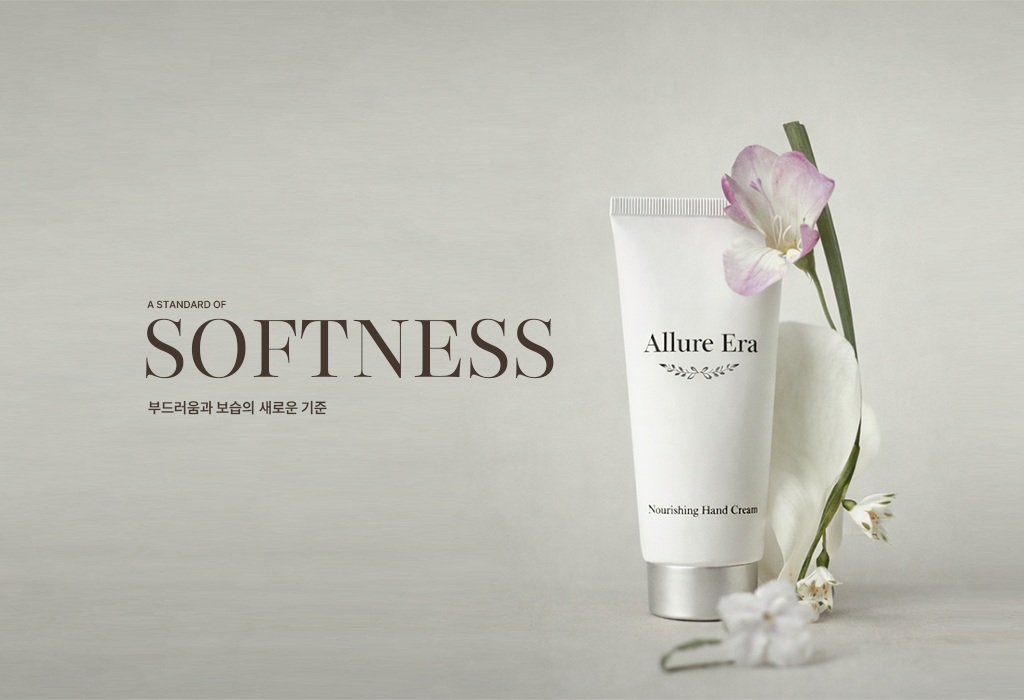
<style>
.page{position:relative;width:1024px;height:700px}
.page>*{position:absolute;margin:0}
.t1{font:10px "Pretendard-Medium";color:#45372f;text-transform:uppercase}
.t2{font:100px "Playfair144pt-Light";letter-spacing:-0.05em;color:#45372f;text-transform:uppercase}
.t3{font:15px "Pretendard-SemiBold";color:#45372f}
</style>
<div class="page">
<p class="t1" style="left:147px;top:300px;width:79px;height:9px">A Standard of</p>
<p class="t2" style="left:146px;top:318px;width:408px;height:61px">softness</p>
<p class="t3" style="left:148px;top:400px;width:179px;height:15px">부드러움과 보습의 새로운 기준</p>
</div>
